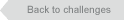
<style>
.page{position:relative;width:124px;height:20px;background:#dcdddd}
.page>*{position:absolute;margin:0}
.t1{font:10px "ArialMT";color:#818485}
</style>
<div class="page">
<p class="t1" style="left:27px;top:5px;width:84px;height:10px">Back to challenges</p>
</div>
